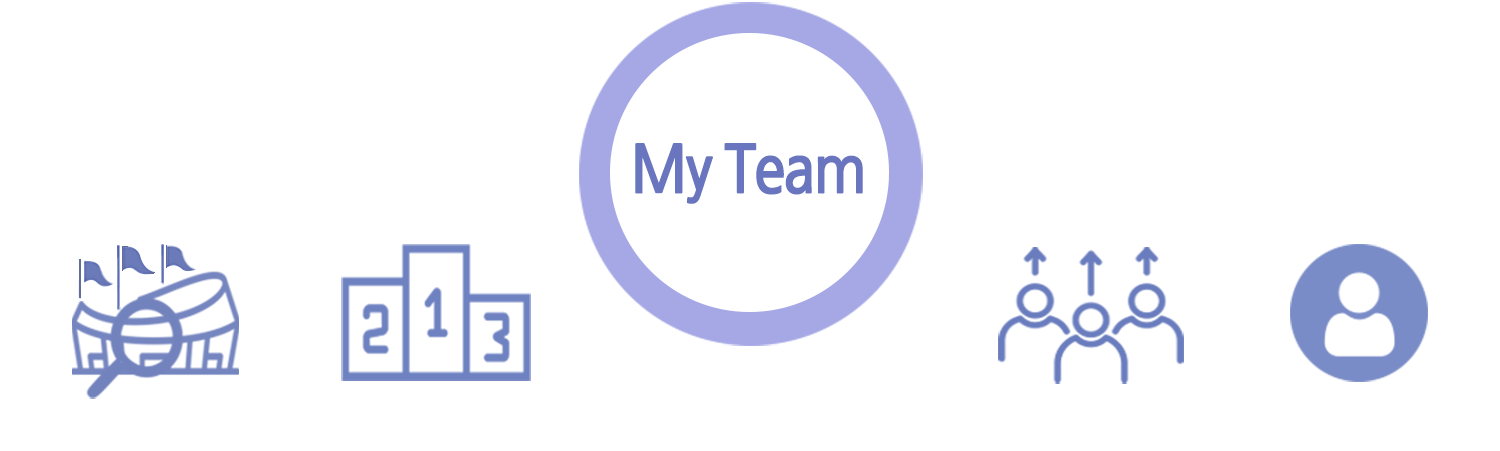
<style>
.page{position:relative;width:1500px;height:451px;background:#ffffff}
.page>*{position:absolute;margin:0}
.t1{font:66.6px "NanumGothicBold";letter-spacing:-0.05em;color:#6976bf;scale:0.9 1}
</style>
<div class="page">
<p class="t1" style="left:635px;top:143px;width:228px;height:61px">My Team</p>
</div>
